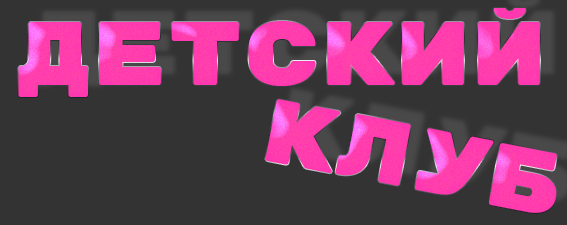
<style>
.page{position:relative;width:567px;height:225px;background:#333333}
.page>*{position:absolute;margin:0}
.t1{font:90px "RubikMonoOne-Regular";color:#ff3eaf}
</style>
<div class="page">
<p class="t1" style="left:18px;top:8px;width:522px;height:89px">Детский</p>
<p class="t1" style="left:18px;top:8px;width:522px;height:89px">Детский</p>
<p class="t1" style="left:18px;top:8px;width:522px;height:89px">Детский</p>
<p class="t1" style="left:265px;top:99px;width:292px;height:114px;rotate:11deg">Клуб</p>
<p class="t1" style="left:265px;top:99px;width:292px;height:114px;rotate:11deg">Клуб</p>
</div>
